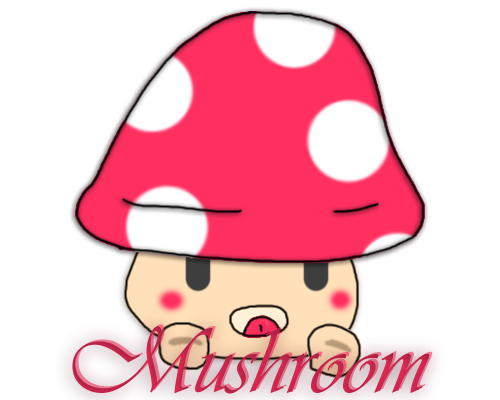
<style>
.page{position:relative;width:500px;height:400px;background:#ffffff}
.page>*{position:absolute;margin:0}
.t1{font:96px "Vivaldii";color:#c9254c}
</style>
<div class="page">
<p class="t1" style="left:72px;top:326px;width:358px;height:68px">Mushroom</p>
</div>
